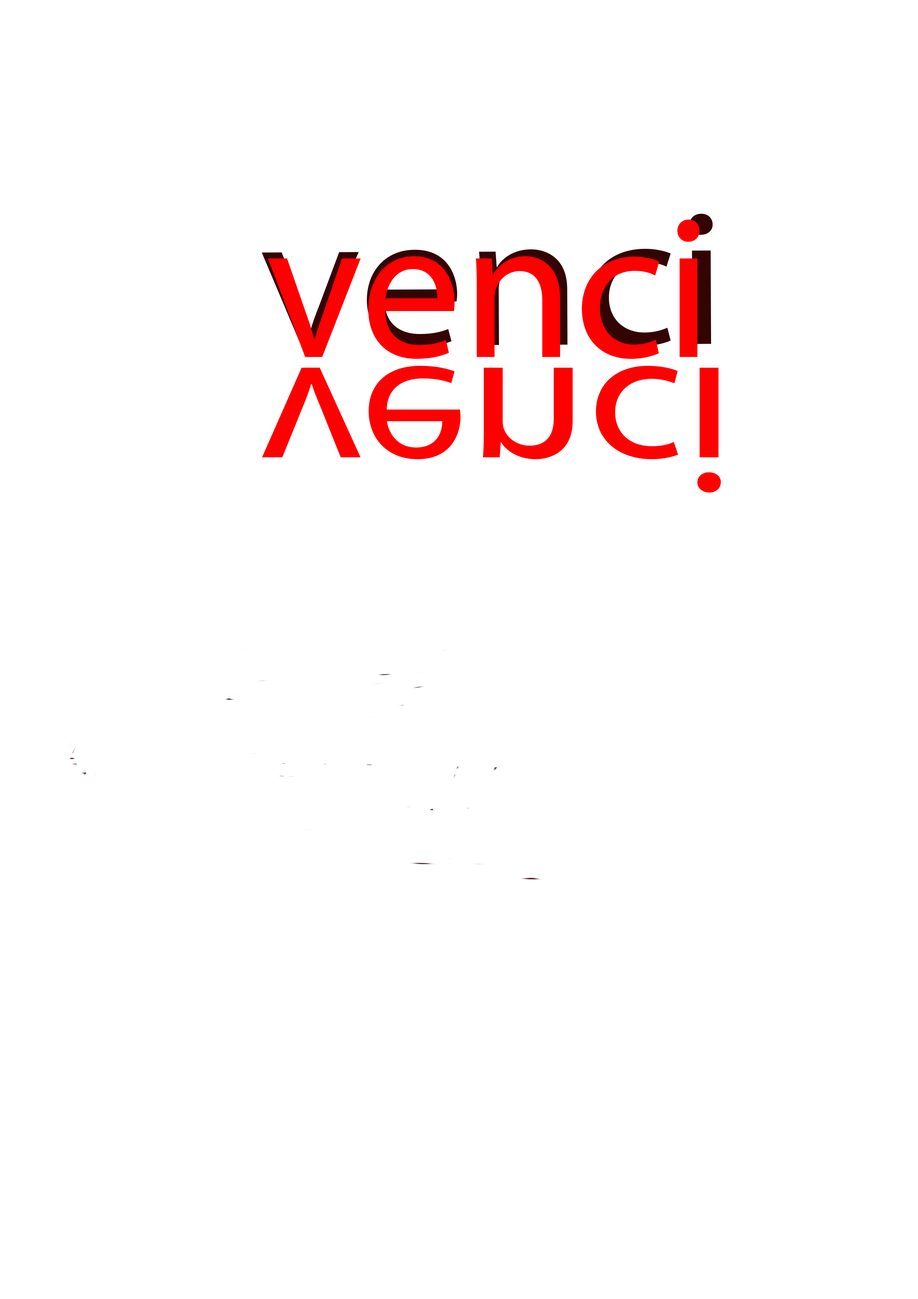
<style>
.page{position:relative;width:918px;height:1299px;background:#ffffff}
.page>*{position:absolute;margin:0}
.t1{font:192.8px "MyriadPro-Regular";scale:1.1 1}
.t2{font:185.1px "MyriadPro-Regular";color:#ff0000;scale:1.16 1}
</style>
<div class="page">
<p class="t1" style="left:262px;top:214px;width:451px;height:133px">venci</p>
<p class="t2" style="left:262px;top:366px;width:459px;height:126px">venci</p>
</div>
